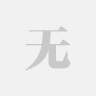
<style>
.page{position:relative;width:96px;height:96px;background:#f1f1f1}
.page>*{position:absolute;margin:0}
.t1{font:48px "FZTYSK--GBK1-0";letter-spacing:0.1em;color:#c9c9c9}
</style>
<div class="page">
<p class="t1" style="left:25px;top:26px;width:46px;height:45px">无</p>
</div>
